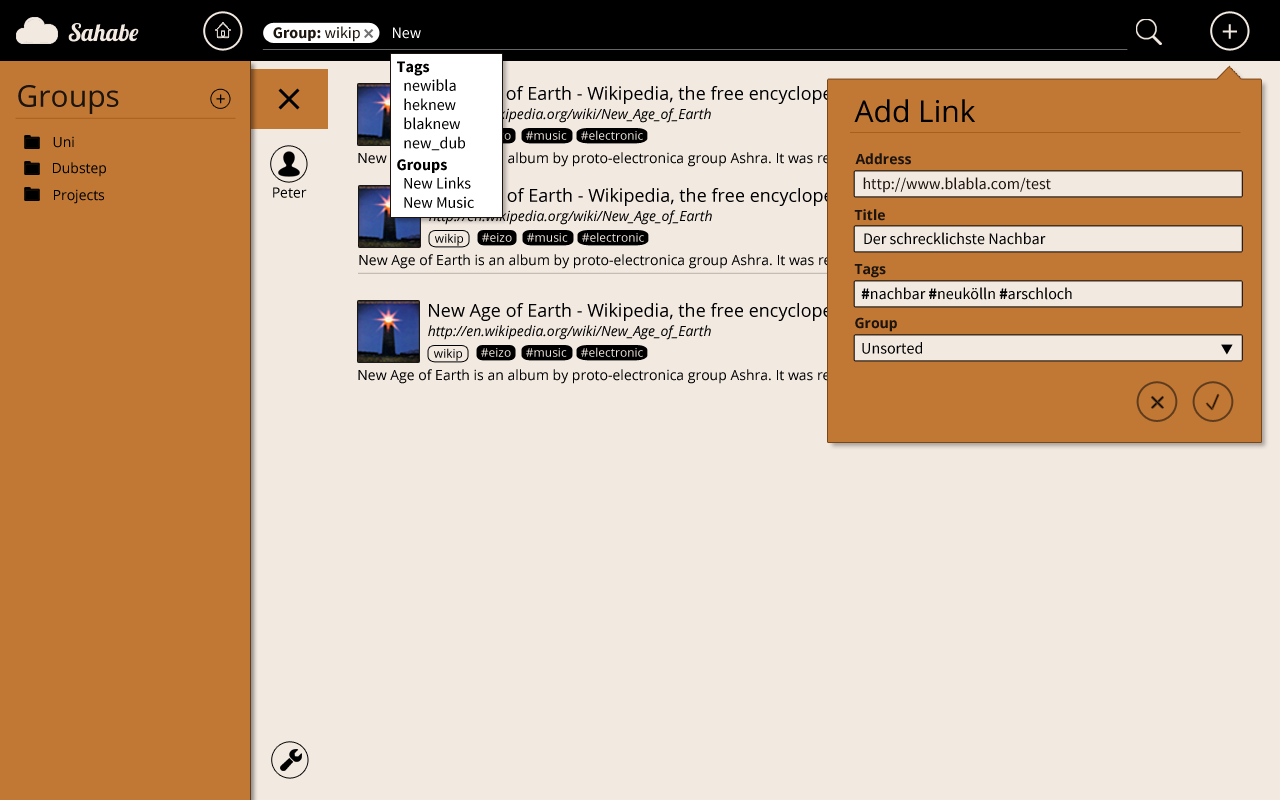
<style>
.page{position:relative;width:1280px;height:800px;background:#f2e9e1}
.page>*{position:absolute;margin:0}
.t1{font:24px "Lobster";color:#f2e9e1}
.t2{font:16px "SourceSansPro-Bold";color:#1c140d}
.t3{font:16px "SourceSansPro-Regular";color:#1c140d}
.t4{font:16px "SourceSansPro-Regular";color:#ffffff}
.t5{font:30px "OpenSans";color:#f2e9e1}
.t6{font:16px "SourceSansPro-Bold";color:#000000}
.t7{font:30px "OpenSans";color:#1c140d}
.t8{font:16px "SourceSansPro-Regular";color:#000000}
.t9{font:18px "OpenSans";color:#000000}
.t10{font:18px "OpenSans";color:#010101}
.t11{font:30px "OpenSans";color:#000000}
.t12{font:14px "OpenSans-Italic";color:#000000}
.t13{font:14px "OpenSans";color:#000000}
.t14{font:12px "OpenSans";color:#f2e9e1}
.t15{font:14px "OpenSans"}
.t16{font:14px "OpenSans-Bold";color:#1c140d}
.t17{font:12px "OpenSans";color:#000000}
.t18{font:12px "OpenSans"}
</style>
<div class="page">
<p class="t1" style="left:68px;top:23px;width:71px;height:19px">Sahabe</p>
<p class="t2" style="left:273px;top:26px;width:87px;height:16px">Group: <span class="t3">wikip</span></p>
<p class="t4" style="left:393px;top:27px;width:28px;height:12px">New</p>
<p class="t5" style="left:1222px;top:24px;width:15px;height:15px">+</p>
<p class="t6" style="left:397px;top:61px;width:33px;height:15px">Tags</p>
<p class="t7" style="left:18px;top:85px;width:101px;height:29px">Groups</p>
<p class="t8" style="left:404px;top:79px;width:61px;height:72px">newibla<br>heknew<br>blaknew<br>new_dub</p>
<p class="t9" style="left:429px;top:86px;width:428px;height:18px">New Age of Earth - Wikipedia, the free encyclopedia</p>
<p class="t10" style="left:216px;top:94px;width:9px;height:10px">+</p>
<p class="t11" style="left:854px;top:99px;width:121px;height:24px">Add Link</p>
<p class="t12" style="left:428px;top:108px;width:283px;height:15px">http://en.wikipedia.org/wiki/New_Age_of_Earth</p>
<p class="t13" style="left:53px;top:136px;width:21px;height:12px">Uni</p>
<p class="t14" style="left:526px;top:131px;width:41px;height:9px">#music</p>
<p class="t14" style="left:581px;top:130px;width:62px;height:10px">#electronic</p>
<p class="t15" style="left:358px;top:152px;width:821px;height:15px">New Age of Earth is an album by proto-electronica group Ashra. It was released in 1976 on Isadora Records. Although released under the band's moniker... it is a solo album by Ashra member Manuel Göttsching.</p>
<p class="t6" style="left:397px;top:159px;width:50px;height:14px">Groups</p>
<p class="t16" style="left:855px;top:153px;width:56px;height:12px">Address</p>
<p class="t13" style="left:53px;top:162px;width:53px;height:15px">Dubstep</p>
<p class="t8" style="left:404px;top:177px;width:70px;height:31px">New Links<br>New Music</p>
<p class="t3" style="left:863px;top:177px;width:188px;height:16px">http://www.blabla.com/test</p>
<p class="t13" style="left:54px;top:189px;width:50px;height:15px">Projects</p>
<p class="t13" style="left:273px;top:187px;width:34px;height:11px">Peter</p>
<p class="t9" style="left:430px;top:188px;width:428px;height:18px">New Age of Earth - Wikipedia, the free encyclopedia</p>
<p class="t16" style="left:854px;top:209px;width:31px;height:12px">Title</p>
<p class="t12" style="left:429px;top:210px;width:283px;height:15px">http://en.wikipedia.org/wiki/New_Age_of_Earth</p>
<p class="t17" style="left:435px;top:233px;width:28px;height:13px">wikip</p>
<p class="t18" style="left:482px;top:233px;width:30px;height:9px">#eizo</p>
<p class="t14" style="left:527px;top:233px;width:41px;height:9px">#music</p>
<p class="t14" style="left:582px;top:232px;width:62px;height:10px">#electronic</p>
<p class="t8" style="left:864px;top:232px;width:182px;height:13px">Der schrecklichste Nachbar</p>
<p class="t15" style="left:359px;top:254px;width:836px;height:15px">New Age of Earth is an album by proto-electronica group Ashra. It was released in 1976 on Isadora Records. Although released ... under the band's moniker... it is a solo album by Ashra member Manuel Göttsching.</p>
<p class="t16" style="left:854px;top:264px;width:32px;height:14px">Tags</p>
<p class="t8" style="left:861px;top:287px;width:211px;height:13px"><span class="t6">#</span>nachbar <span class="t6">#</span>neukölln <span class="t6">#</span>arschloch</p>
<p class="t9" style="left:429px;top:303px;width:428px;height:18px">New Age of Earth - Wikipedia, the free encyclopedia</p>
<p class="t16" style="left:855px;top:317px;width:42px;height:15px">Group</p>
<p class="t12" style="left:428px;top:325px;width:283px;height:15px">http://en.wikipedia.org/wiki/New_Age_of_Earth</p>
<p class="t8" style="left:862px;top:342px;width:60px;height:12px">Unsorted</p>
<p class="t17" style="left:434px;top:348px;width:28px;height:13px">wikip</p>
<p class="t18" style="left:481px;top:348px;width:30px;height:9px">#eizo</p>
<p class="t14" style="left:526px;top:348px;width:41px;height:9px">#music</p>
<p class="t14" style="left:581px;top:347px;width:62px;height:10px">#electronic</p>
<p class="t15" style="left:358px;top:369px;width:821px;height:15px">New Age of Earth is an album by proto-electronica group Ashra. It was released in 1976 on Isadora Records. Although released under the band's moniker... it is a solo album by Ashra member Manuel Göttsching.</p>
</div>
